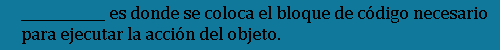
<style>
.page{position:relative;width:500px;height:50px;background:#0f789b}
.page>*{position:absolute;margin:0}
.t1{font:18px "CambriaMath";color:#010101}
</style>
<div class="page">
<p class="t1" style="left:21px;top:6px;width:466px;height:38px">____________ es donde se coloca el bloque de código necesario para ejecutar la acción del objeto.</p>
</div>
